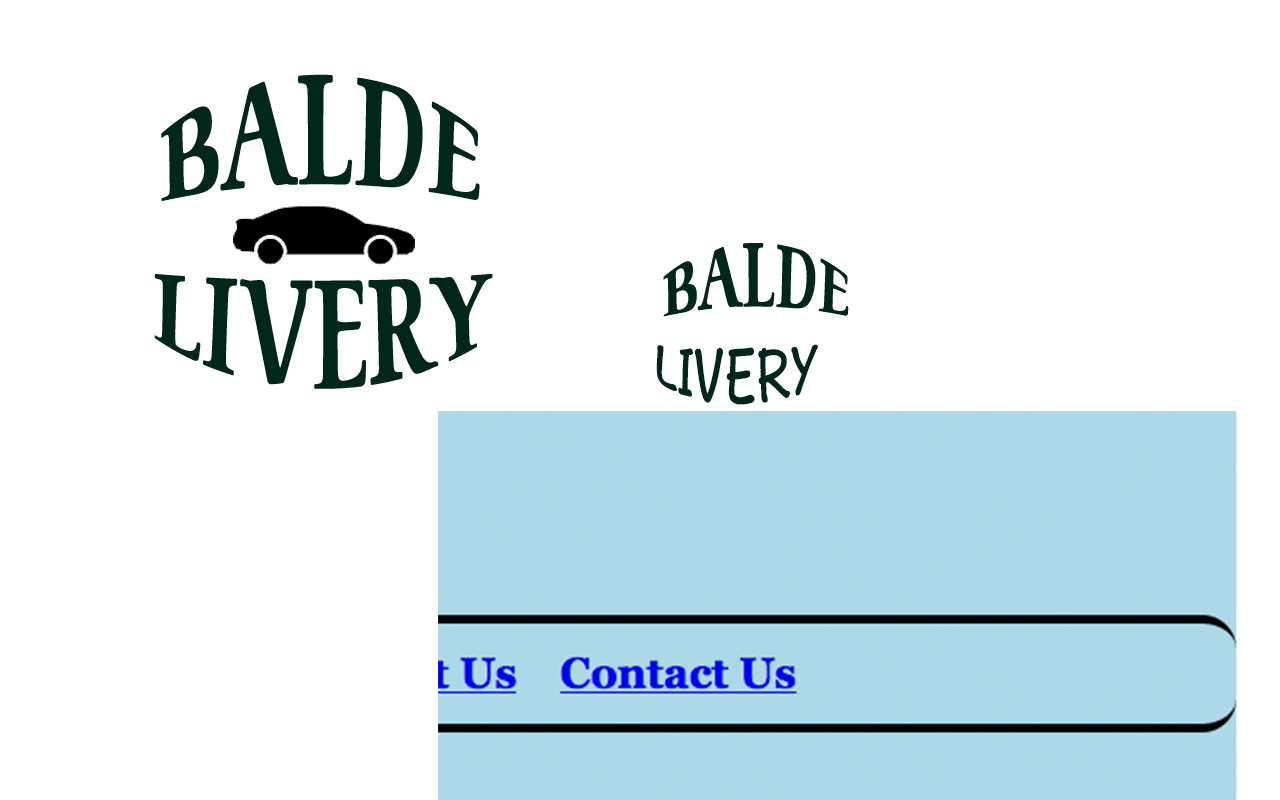
<style>
.page{position:relative;width:1280px;height:800px;background:#ffffff}
.page>*{position:absolute;margin:0}
.t1{font:92.3px "CerigoStd-Bold";color:#00281a}
.t2{font:53.6px "CerigoStd-Bold";color:#00281a}
.t3{font:87.5px "CerigoStd-Bold";color:#00281a}
.t4{font:50.8px "HannotateSC-W7";color:#00281a}
</style>
<div class="page">
<p class="t1" style="left:161px;top:74px;width:319px;height:127px">BALDE</p>
<p class="t2" style="left:663px;top:243px;width:186px;height:74px">BALDE</p>
<p class="t3" style="left:154px;top:273px;width:339px;height:116px">LIVERY</p>
<p class="t4" style="left:656px;top:344px;width:162px;height:61px">LIVERY</p>
</div>
